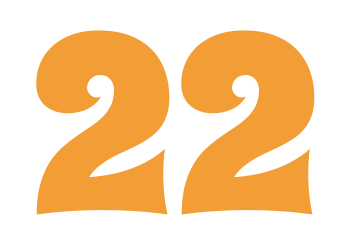
<style>
.page{position:relative;width:354px;height:236px;background:#ffffff}
.page>*{position:absolute;margin:0}
.t1{font:250px "SpicyRice-Regular";color:#f29d35}
</style>
<div class="page">
<p class="t1" style="left:36px;top:30px;width:279px;height:185px">22</p>
</div>
